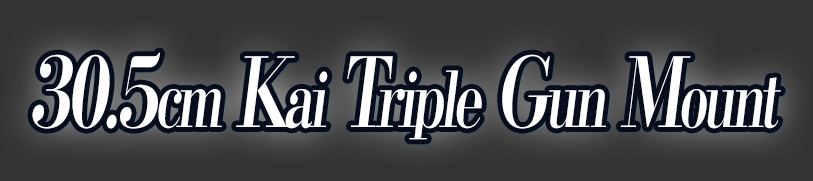
<style>
.page{position:relative;width:813px;height:181px;background:#333333}
.page>*{position:absolute;margin:0}
.t1{font:76.8px "KochoStd-Heavy";letter-spacing:-0.08em;color:#ffffff;font-style:italic;scale:0.7 1}
.t2{font:96px "KochoStd-Heavy";letter-spacing:-0.08em;color:#ffffff;font-style:italic;scale:0.7 1}
</style>
<div class="page">
<p class="t1" style="left:32px;top:52px;width:749px;height:88px"><span class="t2">30.5</span>cm<span class="t2"> K</span>ai<span class="t2"> T</span>riple<span class="t2"> G</span>un<span class="t2"> M</span>ount</p>
</div>
